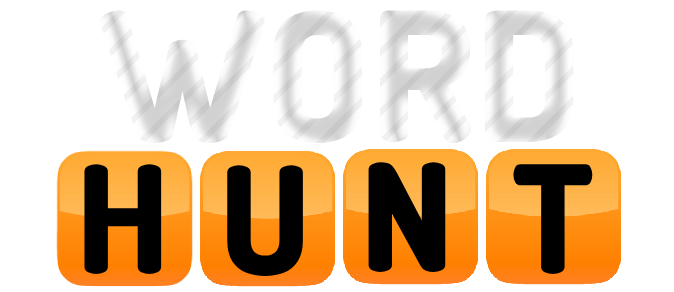
<style>
.page{position:relative;width:674px;height:292px;background:#ffffff}
.page>*{position:absolute;margin:0}
.t1{font:180px "Dosis-ExtraBold";color:#e0e0e0}
.t2{font:150px "Dosis-ExtraBold";color:#000000}
</style>
<div class="page">
<p class="t1" style="left:100px;top:10px;width:474px;height:134px">WORD</p>
<p class="t2" style="left:84px;top:164px;width:78px;height:110px">H</p>
<p class="t2" style="left:227px;top:165px;width:76px;height:111px">U</p>
<p class="t2" style="left:368px;top:162px;width:78px;height:110px">N</p>
<p class="t2" style="left:513px;top:164px;width:80px;height:110px">T</p>
</div>
